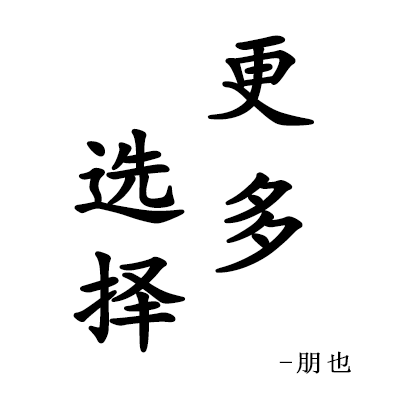
<style>
.page{position:relative;width:400px;height:400px;background:#ffffff}
.page>*{position:absolute;margin:0}
.t1{font:108px "KaiTi";letter-spacing:0.1em;color:#000000;font-weight:bold;scale:1.1 1}
.t2{font:24px "SimSun";letter-spacing:0.1em;color:#000000;font-weight:bold;scale:1.1 1}
</style>
<div class="page">
<p class="t1" style="left:207px;top:35px;width:107px;height:91px">更</p>
<p class="t1" style="left:74px;top:128px;width:111px;height:96px">选</p>
<p class="t1" style="left:215px;top:172px;width:88px;height:101px">多</p>
<p class="t1" style="left:73px;top:251px;width:113px;height:102px">择</p>
<p class="t2" style="left:279px;top:351px;width:72px;height:23px">-朋也</p>
</div>
